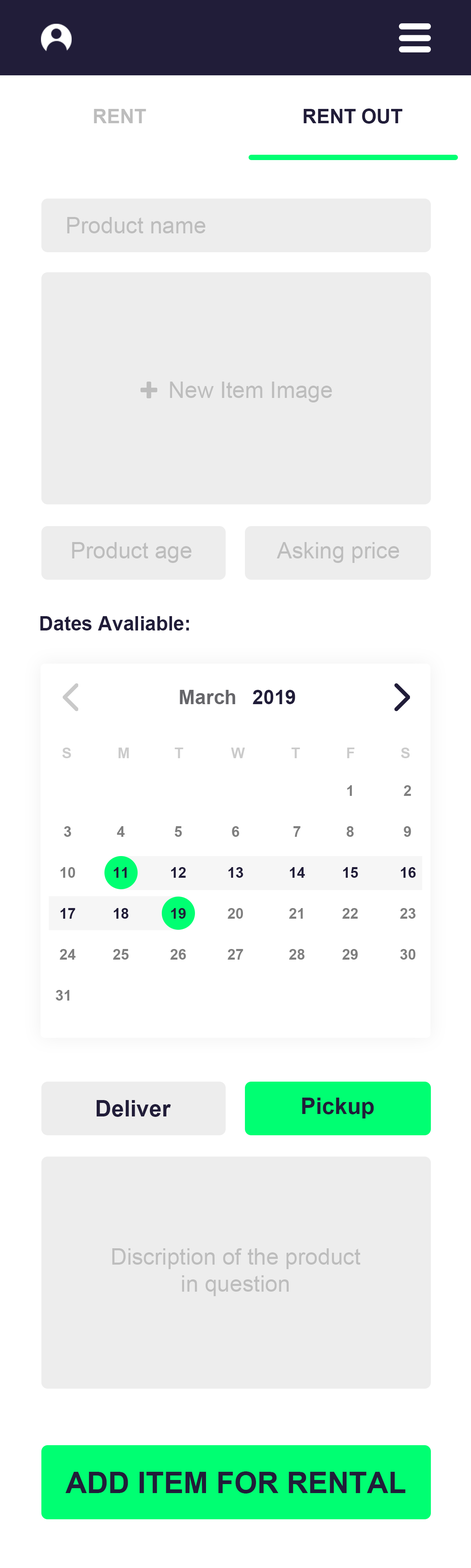
<style>
.page{position:relative;width:471px;height:1568px;background:#ffffff}
.page>*{position:absolute;margin:0}
.t1{font:19.7px "Arial-BoldMT";color:#bdbdbd;text-transform:uppercase}
.t2{font:19.7px "Arial-BoldMT";color:#211d39;text-transform:uppercase}
.t3{font:22.6px "ArialMT";color:#bdbdbd}
.t4{font:19.7px "Arial-BoldMT";color:#211d39}
.t5{font:19.7px "Arial-BoldMT";color:#66666a}
.t6{font:14.7px "Arial-BoldMT";color:#cbcbcb}
.t7{font:14.7px/40.9px "Arial-BoldMT";color:#7f7f7f}
.t8{font:14.7px/40.9px "Arial-BoldMT";color:#211d39}
.t9{font:22.6px "Arial-BoldMT";color:#211d39}
.t10{font:29.5px "Arial-BoldMT";color:#211d39}
</style>
<div class="page">
<p class="t1" style="left:94px;top:109px;width:52px;height:14px">Rent</p>
<p class="t2" style="left:303px;top:108px;width:99px;height:16px">Rent Out</p>
<p class="t3" style="left:67px;top:217px;width:139px;height:16px">Product name</p>
<p class="t3" style="left:170px;top:382px;width:162px;height:20px">New Item Image</p>
<p class="t3" style="left:72px;top:542px;width:120px;height:21px">Product age</p>
<p class="t3" style="left:276px;top:542px;width:123px;height:21px">Asking price</p>
<p class="t4" style="left:40px;top:616px;width:149px;height:14px">Dates Avaliable:</p>
<p class="t5" style="left:180px;top:690px;width:55px;height:14px">March</p>
<p class="t4" style="left:253px;top:690px;width:42px;height:14px">2019</p>
<p class="t6" style="left:62px;top:748px;width:9px;height:10px">S</p>
<p class="t6" style="left:118px;top:748px;width:11px;height:10px">M</p>
<p class="t6" style="left:174px;top:748px;width:9px;height:10px">T</p>
<p class="t6" style="left:231px;top:748px;width:14px;height:10px">W</p>
<p class="t6" style="left:291px;top:748px;width:9px;height:10px">T</p>
<p class="t6" style="left:347px;top:748px;width:8px;height:10px">F</p>
<p class="t6" style="left:401px;top:748px;width:9px;height:10px">S</p>
<p class="t7" style="left:56px;top:785px;width:360px;height:216px">1            2<br>  3           4            5            6             7           8            9<br> 10<span class="t8">         11          12          13           14         15          16<br> 17         18          19  </span>        20           21         22          23<br> 24         25          26          27           28         29          30<br>31</p>
<p class="t9" style="left:302px;top:1098px;width:72px;height:20px">Pickup</p>
<p class="t9" style="left:97px;top:1100px;width:74px;height:17px">Deliver</p>
<p class="t3" style="left:112px;top:1248px;width:248px;height:48px;text-align:center">Discription of the product<br>in question</p>
<p class="t10" style="left:66px;top:1471px;width:339px;height:22px">ADD ITEM FOR RENTAL</p>
</div>
